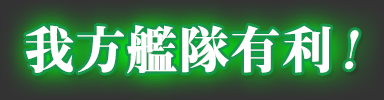
<style>
.page{position:relative;width:384px;height:100px}
.page>*{position:absolute;margin:0}
.t1{font:50px "KochoStd-Heavy";letter-spacing:0.013em;color:#ffffff;font-weight:bold}
.t2{font:50px "KochoStd-Heavy";letter-spacing:0.013em;color:#ffffff;font-weight:bold;font-style:italic}
</style>
<div class="page">
<p class="t1" style="left:26px;top:25px;width:333px;height:49px">我方艦隊有利<span class="t2">！</span></p>
</div>
